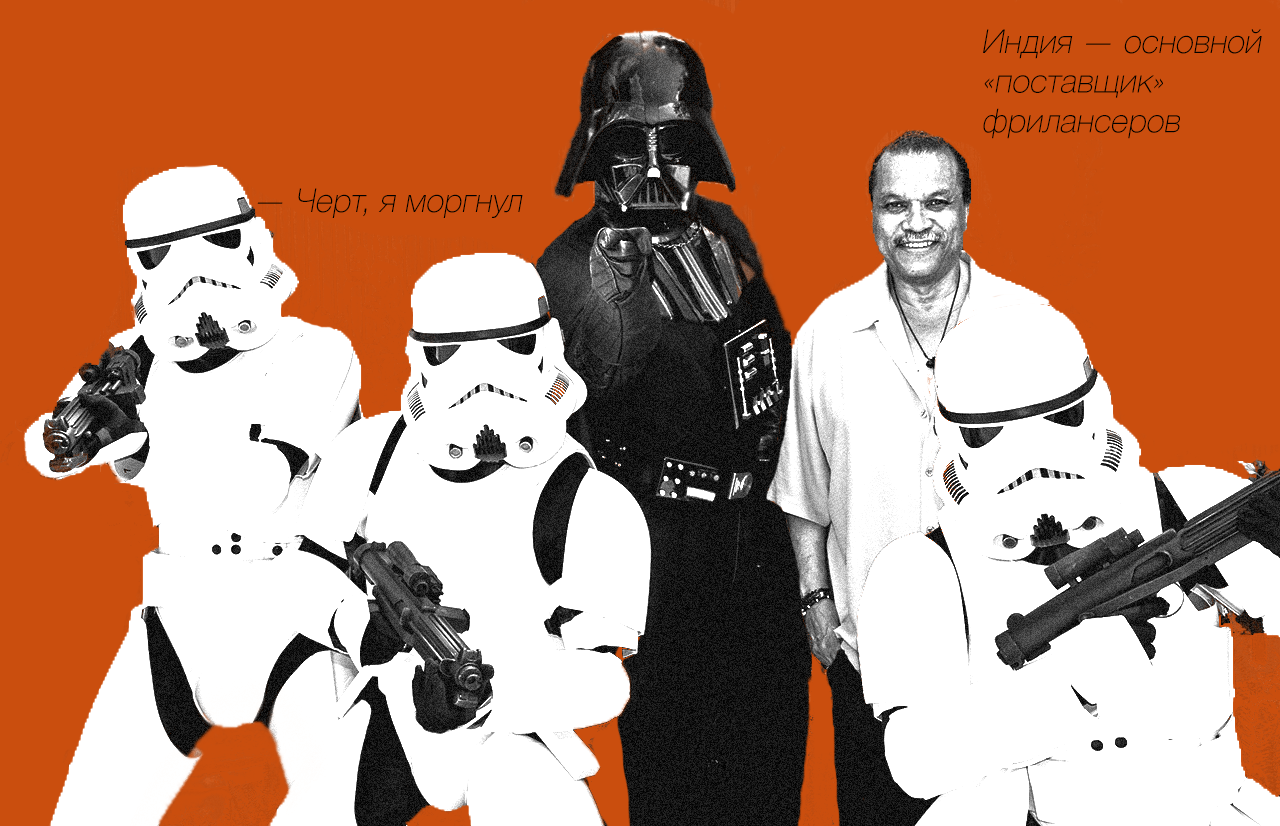
<style>
.page{position:relative;width:1280px;height:826px;background:#ca4e0e}
.page>*{position:absolute;margin:0}
.t1{font:33px "HelveticaNeue-Thin";color:#000000;font-style:italic}
</style>
<div class="page">
<p class="t1" style="left:983px;top:29px;width:279px;height:110px">Индия — основной<br>«поставщик»<br>фрилансеров</p>
<p class="t1" style="left:257px;top:188px;width:266px;height:30px">— Черт, я моргнул</p>
</div>
